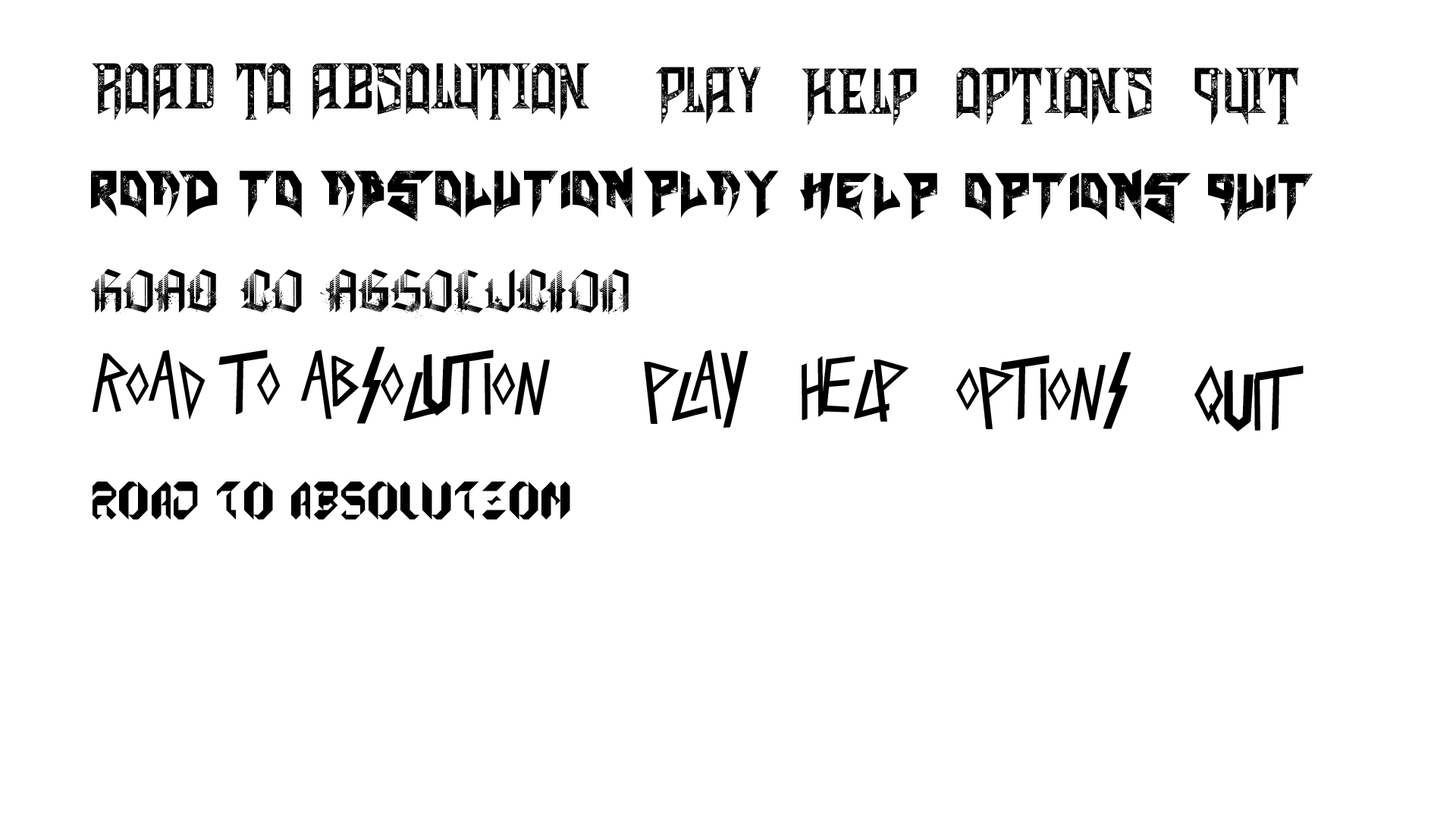
<style>
.page{position:relative;width:1456px;height:819px;background:#ffffff}
.page>*{position:absolute;margin:0}
.t1{font:75.8px "ShadowsofSecurity";color:#000000}
.t2{font:75.8px "Blade";color:#000000}
.t3{font:75.8px "KILLTHEPANDA";color:#000000}
.t4{font:75.8px "Slaytanic";color:#000000}
.t5{font:75.8px "5Kreeper";color:#000000}
</style>
<div class="page">
<p class="t1" style="left:92px;top:63px;width:498px;height:58px">Road to absolution</p>
<p class="t1" style="left:655px;top:67px;width:106px;height:57px">play</p>
<p class="t1" style="left:802px;top:68px;width:115px;height:58px">Help</p>
<p class="t1" style="left:956px;top:67px;width:196px;height:58px">Options</p>
<p class="t1" style="left:1194px;top:67px;width:105px;height:58px">QUIT</p>
<p class="t2" style="left:91px;top:167px;width:541px;height:54px">ROAD TO ABSOLUTION</p>
<p class="t2" style="left:644px;top:171px;width:135px;height:47px">play</p>
<p class="t2" style="left:800px;top:173px;width:137px;height:48px">help</p>
<p class="t2" style="left:965px;top:169px;width:226px;height:55px">options</p>
<p class="t2" style="left:1208px;top:174px;width:105px;height:47px">quit</p>
<p class="t3" style="left:91px;top:268px;width:539px;height:50px">ROAD TO ABSOLUTION</p>
<p class="t4" style="left:92px;top:347px;width:458px;height:77px">ROAD TO ABSOLUTION</p>
<p class="t4" style="left:644px;top:350px;width:104px;height:78px">PLAY</p>
<p class="t4" style="left:956px;top:352px;width:175px;height:77px">OPTIONS</p>
<p class="t4" style="left:802px;top:356px;width:106px;height:66px">HELP</p>
<p class="t4" style="left:1194px;top:366px;width:110px;height:65px">QUIT</p>
<p class="t5" style="left:93px;top:482px;width:477px;height:37px">ROAD TO ABSOLUTION</p>
</div>
